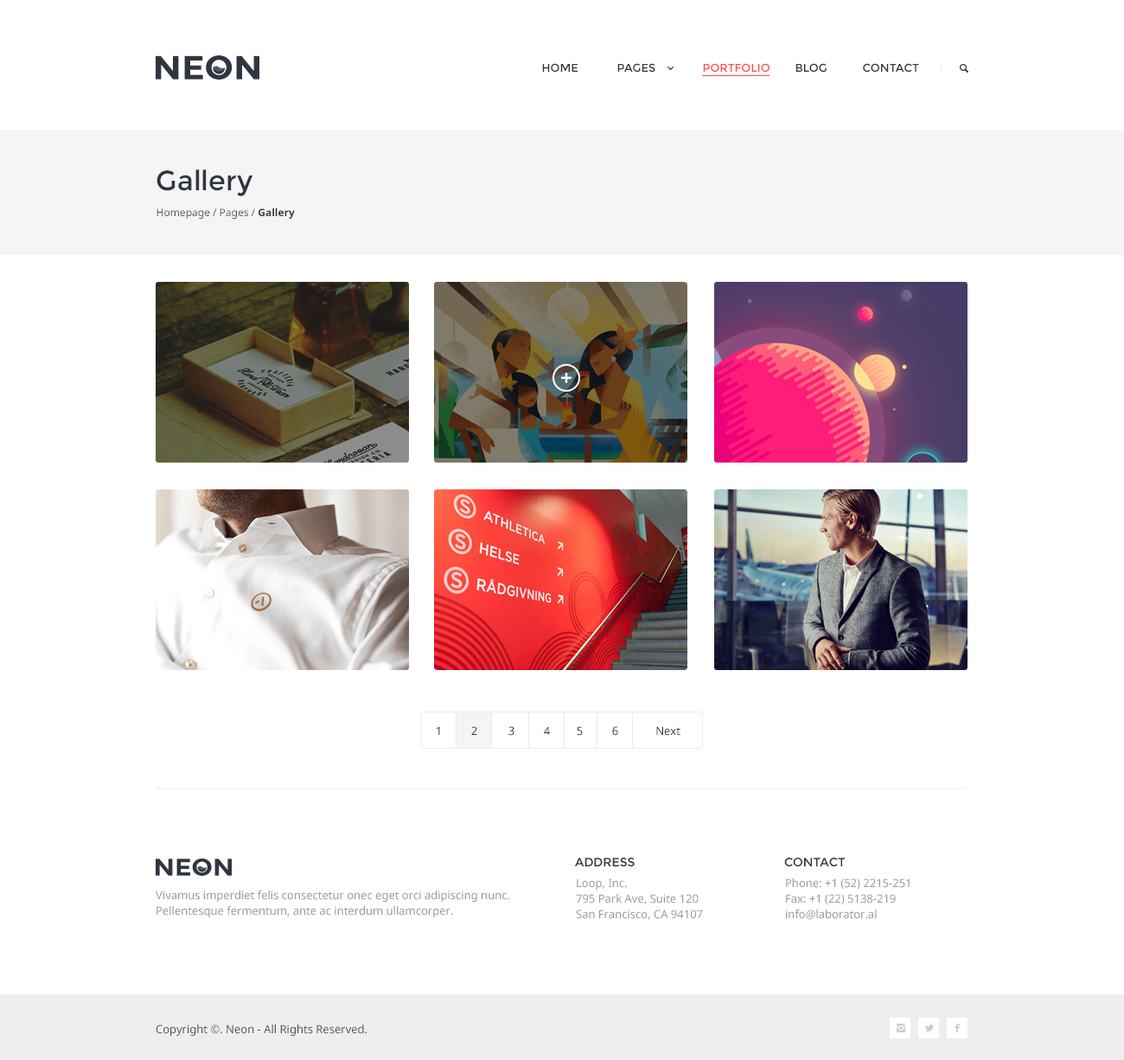
<style>
.page{position:relative;width:1124px;height:1060px;background:#ffffff}
.page>*{position:absolute;margin:0}
.t1{font:33.5px "Montserrat-Bold";color:#303641;scale:1.06 1}
.t2{font:11.2px "Montserrat-Regular";color:#303641;text-transform:uppercase}
.t3{font:11.2px "Montserrat-Regular";color:#ff4e50;text-transform:uppercase}
.t4{font:27.7px "Montserrat-Regular";color:#303641}
.t5{font:10.4px "NotoSans";color:#555555}
.t6{font:10.4px "NotoSans-Bold";color:#303641}
.t7{font:11.2px "NotoSans";color:#303641}
.t8{font:12.1px "Montserrat-Regular";color:#303641;text-transform:uppercase}
.t9{font:24px "Montserrat-Bold";color:#303641;scale:1.08 1}
.t10{font:11.2px/15.6px "NotoSans";color:#999999}
.t11{font:11.2px "NotoSans";color:#555555}
</style>
<div class="page">
<p class="t1" style="left:156px;top:55px;width:103px;height:25px">NEON</p>
<p class="t2" style="left:542px;top:63px;width:36px;height:9px">Home</p>
<p class="t2" style="left:618px;top:63px;width:38px;height:9px">Pages</p>
<p class="t3" style="left:703px;top:63px;width:67px;height:9px">Portfolio</p>
<p class="t2" style="left:796px;top:63px;width:31px;height:9px">Blog</p>
<p class="t2" style="left:863px;top:63px;width:56px;height:9px">Contact</p>
<p class="t4" style="left:157px;top:170px;width:96px;height:26px">Gallery</p>
<p class="t5" style="left:157px;top:208px;width:138px;height:11px">Homepage / Pages / <span class="t6">Gallery</span></p>
<p class="t7" style="left:437px;top:727px;width:3px;height:8px">1</p>
<p class="t7" style="left:471px;top:727px;width:6px;height:8px">2</p>
<p class="t7" style="left:509px;top:727px;width:6px;height:9px">3</p>
<p class="t7" style="left:544px;top:727px;width:6px;height:8px">4</p>
<p class="t7" style="left:577px;top:727px;width:6px;height:9px">5</p>
<p class="t7" style="left:612px;top:727px;width:6px;height:9px">6</p>
<p class="t7" style="left:657px;top:727px;width:24px;height:9px">Next</p>
<p class="t8" style="left:575px;top:857px;width:60px;height:11px">address</p>
<p class="t8" style="left:785px;top:857px;width:60px;height:11px">contact</p>
<p class="t9" style="left:156px;top:859px;width:76px;height:17px">NEON</p>
<p class="t10" style="left:576px;top:879px;width:127px;height:41px">Loop, Inc. <br>795 Park Ave, Suite 120 <br>San Francisco, CA 94107</p>
<p class="t10" style="left:786px;top:879px;width:124px;height:41px">Phone: +1 (52) 2215-251<br>Fax: +1 (22) 5138-219<br>info@laborator.al</p>
<p class="t10" style="left:156px;top:891px;width:353px;height:27px">Vivamus imperdiet felis consectetur onec eget orci adipiscing nunc. <br>Pellentesque fermentum, ante ac interdum ullamcorper.</p>
<p class="t11" style="left:156px;top:1025px;width:211px;height:11px">Copyright ©. Neon - All Rights Reserved.</p>
</div>
